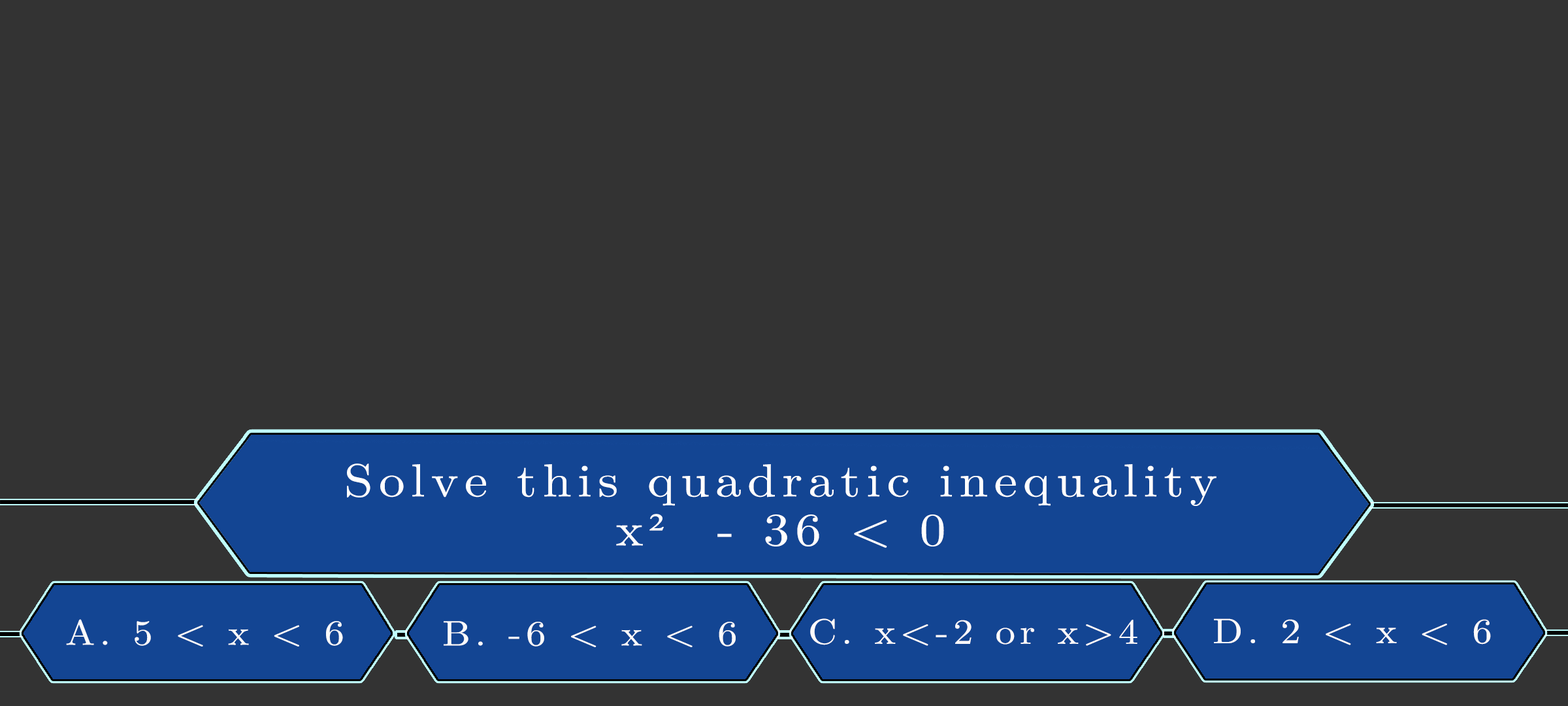
<style>
.page{position:relative;width:1568px;height:706px;background:#333333}
.page>*{position:absolute;margin:0}
.t1{font:46.3px/49px "LatinModernMath-Regular";letter-spacing:0.115em;color:#ffffff;scale:1.12 1}
.t2{font:46.3px/49px "TimesNewRomanPSMT";letter-spacing:0.115em;color:#ffffff;scale:1.12 1}
.t3{font:35.4px "LatinModernMath-Regular";letter-spacing:0.115em;color:#fbfbfb;scale:1.12 1}
.t4{font:35.4px "LatinModernMath-Regular";letter-spacing:0.115em;color:#fcfbfb;text-transform:uppercase;scale:1.12 1}
.t5{font:35.4px "LatinModernMath-Regular";letter-spacing:0.115em;color:#fcfbfb;scale:1.12 1}
.t6{font:35.4px "LatinModernMath-Regular";letter-spacing:0.115em;color:#fffbfb;scale:1.12 1}
.t7{font:35.4px "LatinModernMath-Regular";letter-spacing:0.115em;color:#fffbfb;text-transform:uppercase;scale:1.12 1}
.t8{font:35.4px "LatinModernMath-Regular";letter-spacing:0.115em;color:#fefafa;text-transform:uppercase;scale:1.12 1}
.t9{font:35.4px "LatinModernMath-Regular";letter-spacing:0.115em;color:#fefafa;scale:1.12 1}
</style>
<div class="page">
<p class="t1" style="left:347px;top:463px;width:870px;height:84px;text-align:center">Solve this quadratic inequality<br>x<span class="t2">²</span>  - 36 &lt; 0</p>
<p class="t3" style="left:66px;top:619px;width:277px;height:27px">A. 5 &lt; x &lt; 6</p>
<p class="t4" style="left:444px;top:621px;width:292px;height:26px">b. -6 &lt; <span class="t5">x</span> &lt; 6</p>
<p class="t6" style="left:810px;top:618px;width:327px;height:27px"><span class="t7">c. </span>x&lt;-2 or x&gt;4</p>
<p class="t8" style="left:1214px;top:618px;width:277px;height:27px">d. 2 &lt; <span class="t9">x</span> &lt; 6</p>
</div>
